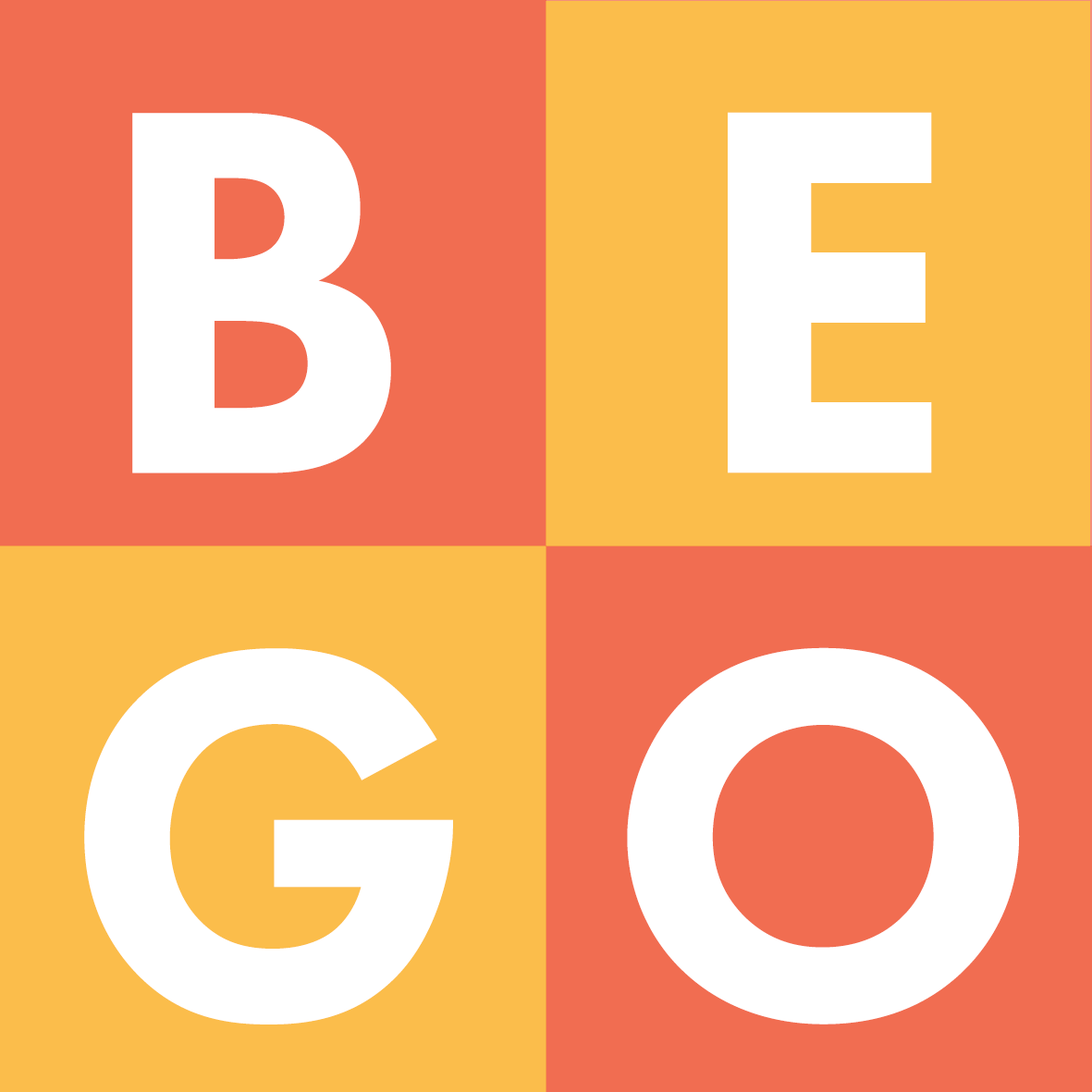
<style>
.page{position:relative;width:1092px;height:1092px;background:#fbbd4b}
.page>*{position:absolute;margin:0}
.t1{font:539.4px "FuturaPT-Heavy";letter-spacing:-0.025em;color:#ffffff}
</style>
<div class="page">
<p class="t1" style="left:132px;top:113px;width:259px;height:360px">B</p>
<p class="t1" style="left:728px;top:112px;width:204px;height:361px">E</p>
<p class="t1" style="left:84px;top:648px;width:369px;height:376px">G</p>
<p class="t1" style="left:627px;top:647px;width:393px;height:377px">O</p>
</div>
